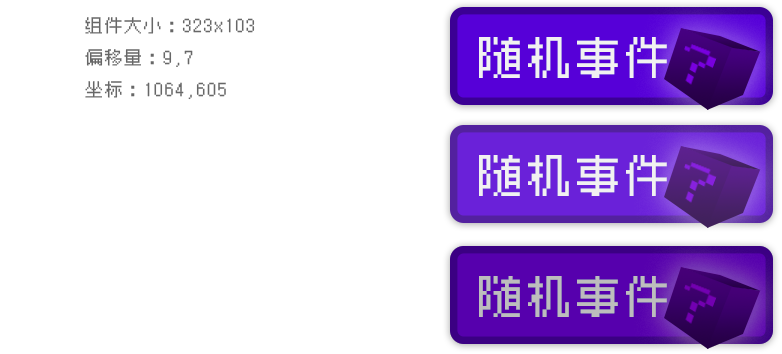
<style>
.page{position:relative;width:782px;height:354px;background:#ffffff}
.page>*{position:absolute;margin:0}
.t1{font:17.7px/31.8px "Zpix";color:#676767}
.t2{font:44.8px "Zpix";color:#f1f1f1}
.t3{font:44.8px "Zpix";color:#bdbdbd}
</style>
<div class="page">
<p class="t1" style="left:85px;top:17px;width:170px;height:83px">组件大小：323x103<br>偏移量：9,7<br>坐标：1064,605</p>
<p class="t2" style="left:479px;top:37px;width:188px;height:41px">随机事件</p>
<p class="t2" style="left:479px;top:155px;width:188px;height:41px">随机事件</p>
<p class="t3" style="left:479px;top:276px;width:188px;height:41px">随机事件</p>
</div>
